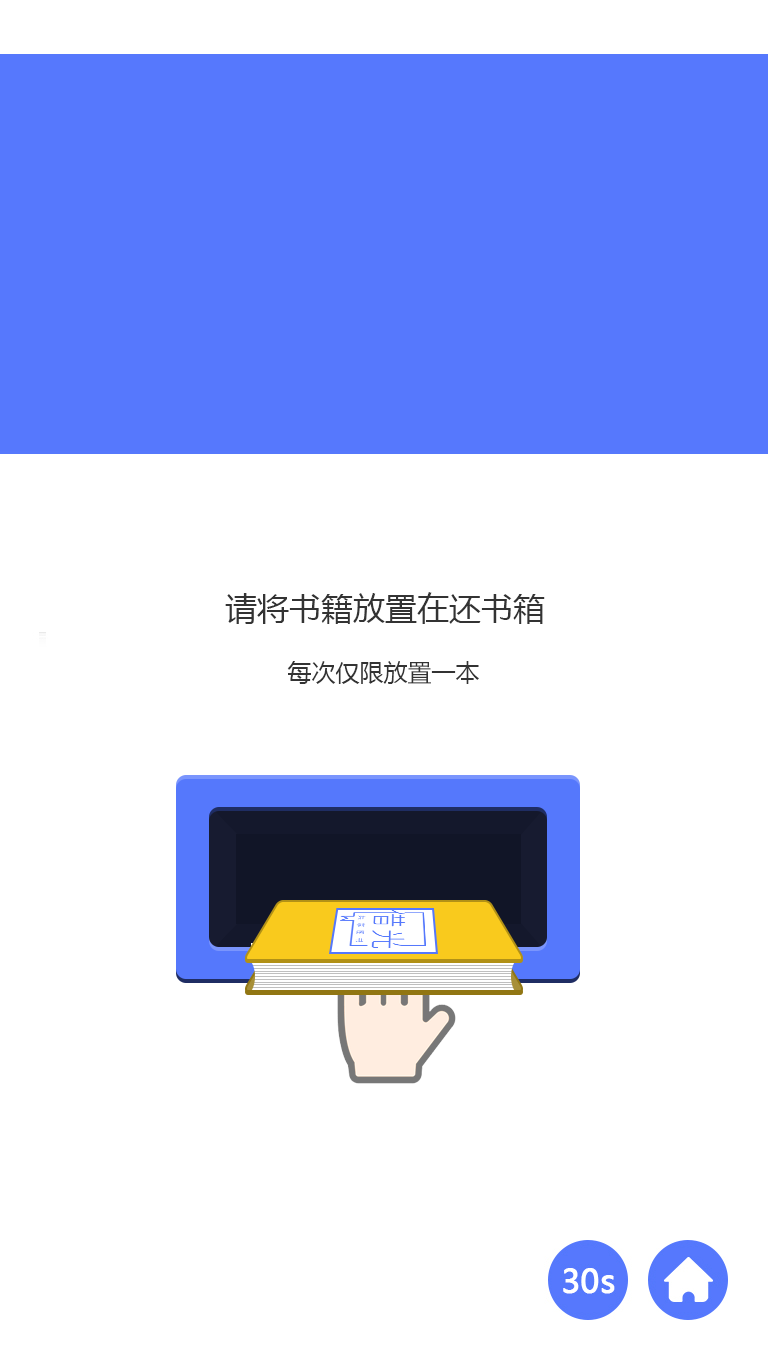
<style>
.page{position:relative;width:768px;height:1360px;background:#ffffff}
.page>*{position:absolute;margin:0}
.t1{font:32px "MicrosoftYaHei";color:#333333}
.t2{font:24px "MicrosoftYaHei";color:#333333}
</style>
<div class="page">
<p class="t1" style="left:225px;top:592px;width:320px;height:32px">请将书籍放置在还书箱</p>
<p class="t2" style="left:287px;top:661px;width:192px;height:23px">每次仅限放置一本</p>
</div>
